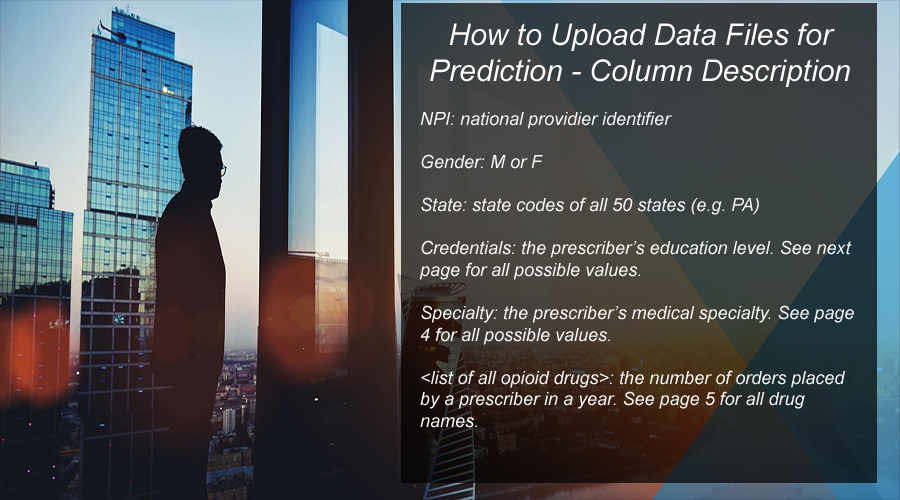
<style>
.page{position:relative;width:900px;height:500px}
.page>*{position:absolute;margin:0}
.t1{font:18px "Arial-ItalicMT";color:#fffdfd}
.t2{font:30px "Arial-ItalicMT";color:#fffdfd}
</style>
<div class="page">
<p class="t1" style="left:419px;top:23px;width:435px;height:405px;text-align:center"><span class="t2">How to Upload Data Files for Prediction - Column Description<br></span><br>NPI: national providier identifier<br><br>Gender: M or F<br><br>State: state codes of all 50 states (e.g. PA)<br><br>Credentials: the prescriber’s education level. See next page for all possible values.<br><br>Specialty: the prescriber’s medical specialty. See page 4 for all possible values.<br><br>&lt;list of all opioid drugs&gt;: the number of orders placed by a prescriber in a year. See page 5 for all drug names.</p>
</div>
